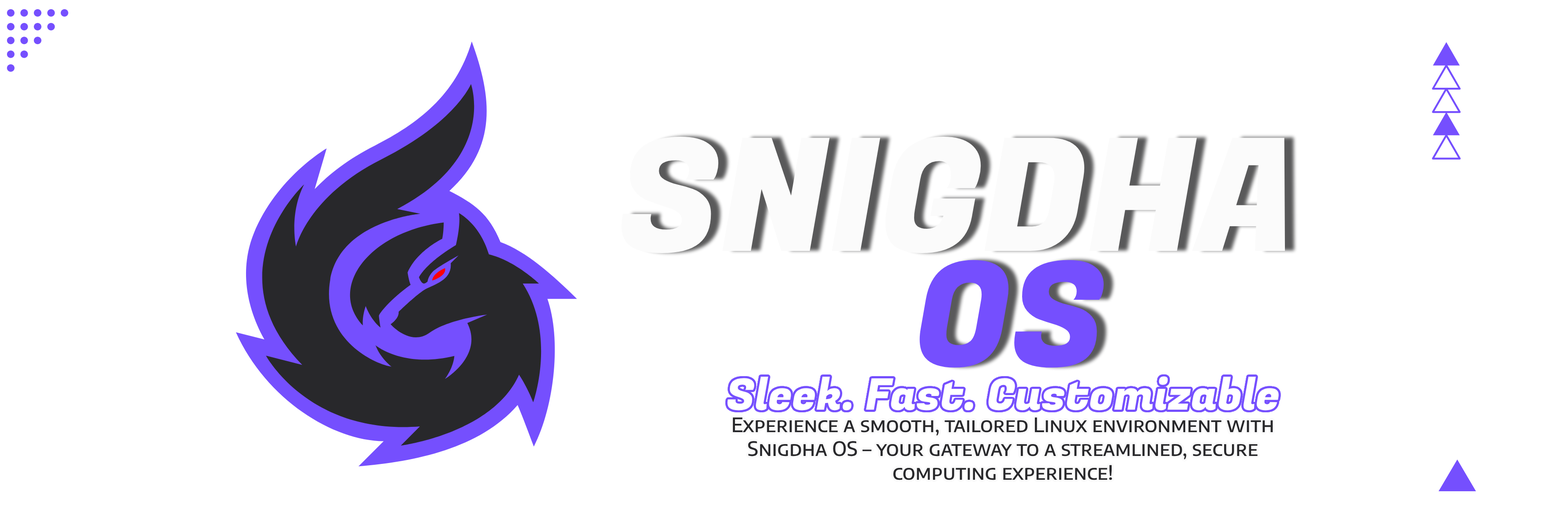
<style>
.page{position:relative;width:1568px;height:508px;background:#ffffff}
.page>*{position:absolute;margin:0}
.t1{font:157.1px "FugazOne-Regular";color:#fbfbfb;font-variant:small-caps}
.t2{font:145.1px "FugazOne-Regular";color:#754ffe}
.t3{font:43.4px "FugazOne-Regular";color:#ffffff}
.t4{font:19.8px "EncodeSansSC-Medium";color:#28282b}
</style>
<div class="page">
<p class="t1" style="left:621px;top:137px;width:664px;height:116px">SNIGDHA</p>
<p class="t2" style="left:919px;top:260px;width:185px;height:108px">OS</p>
<p class="t3" style="left:727px;top:376px;width:552px;height:35px">Sleek. Fast. Customizable</p>
<p class="t4" style="left:733px;top:417px;width:540px;height:63px;text-align:center">Experience a smooth, tailored Linux environment with Snigdha OS – your gateway to a streamlined, secure computing experience!</p>
</div>
